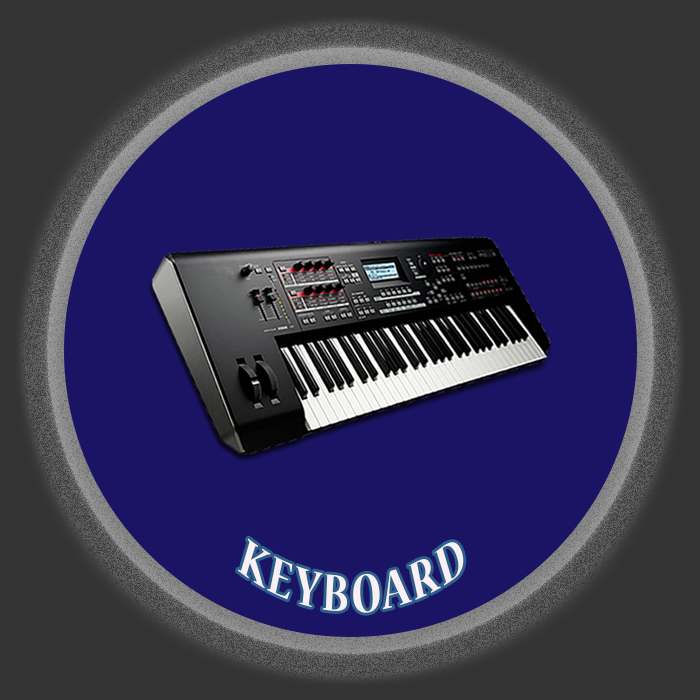
<style>
.page{position:relative;width:700px;height:700px;background:#1b1464}
.page>*{position:absolute;margin:0}
.t1{font:51.7px "NuevaStd-Bold";letter-spacing:0.05em;color:#f8f0f2;scale:0.83 1}
</style>
<div class="page">
<p class="t1" style="left:238px;top:538px;width:226px;height:75px;rotate:-1deg">KEYBOARD</p>
</div>
